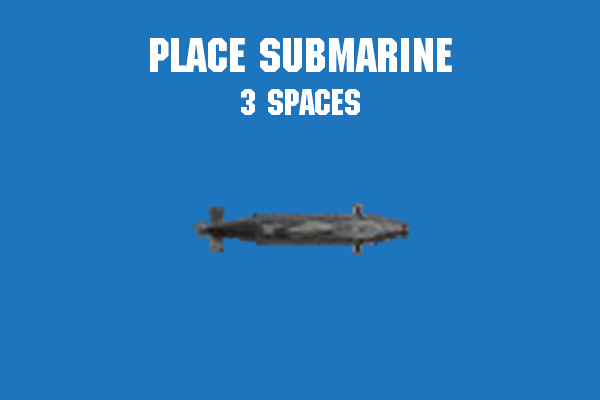
<style>
.page{position:relative;width:600px;height:400px;background:#1d75bd}
.page>*{position:absolute;margin:0}
.t1{font:48px "MachineStd";color:#ffffff}
.t2{font:36px "MachineStd";color:#ffffff}
</style>
<div class="page">
<p class="t1" style="left:150px;top:38px;width:302px;height:77px;text-align:center">Place SubMarine<br><span class="t2">3 spaces</span></p>
</div>
